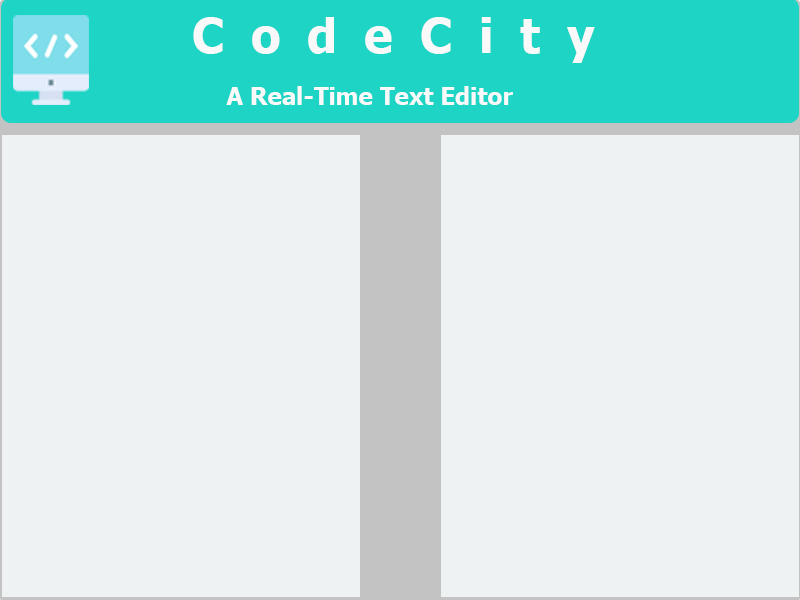
<style>
.page{position:relative;width:800px;height:600px;background:#eef2f2}
.page>*{position:absolute;margin:0}
.t1{font:48px "Tahoma-Bold";letter-spacing:0.56em;color:#f9f9f9}
.t2{font:24px "Tahoma-Bold";color:#f9f9f9}
</style>
<div class="page">
<p class="t1" style="left:193px;top:17px;width:402px;height:46px">CodeCity</p>
<p class="t2" style="left:226px;top:86px;width:287px;height:19px">A Real-Time Text Editor</p>
</div>
